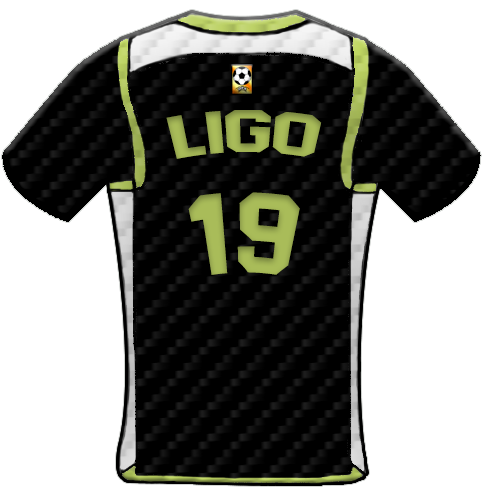
<style>
.page{position:relative;width:482px;height:494px;background:#ffffff}
.page>*{position:absolute;margin:0}
.t1{font:59.4px "AdidasHalfBlock2016";color:#a9bc59;scale:1.13 1}
.t2{font:113.8px "AdidasHalfBlock2016";color:#a9bc59}
</style>
<div class="page">
<p class="t1" style="left:166px;top:110px;width:156px;height:49px">Ligo</p>
<p class="t2" style="left:188px;top:192px;width:112px;height:83px">19</p>
</div>
